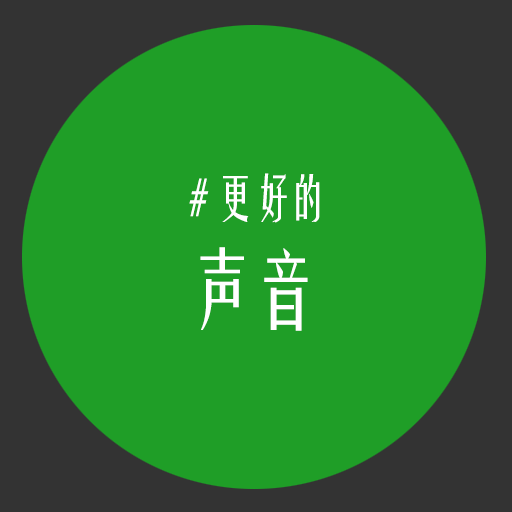
<style>
.page{position:relative;width:512px;height:512px;background:#1f9e27}
.page>*{position:absolute;margin:0}
.t1{font:50px "FZYTK--GBK1-0";letter-spacing:-0.02em;color:#ffffff;scale:0.75 1}
.t2{font:85px "FZYTK--GBK1-0";letter-spacing:-0.02em;color:#ffffff;scale:0.75 1}
</style>
<div class="page">
<p class="t1" style="left:189px;top:173px;width:131px;height:50px"># 更好的</p>
<p class="t2" style="left:200px;top:247px;width:108px;height:84px">声音</p>
</div>
